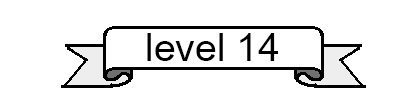
<style>
.page{position:relative;width:400px;height:100px;background:#ffffff}
.page>*{position:absolute;margin:0}
.t1{font:39.5px "ArialNarrow";color:#000000;scale:1.2 1}
</style>
<div class="page">
<p class="t1" style="left:147px;top:33px;width:131px;height:28px">level 14</p>
</div>
